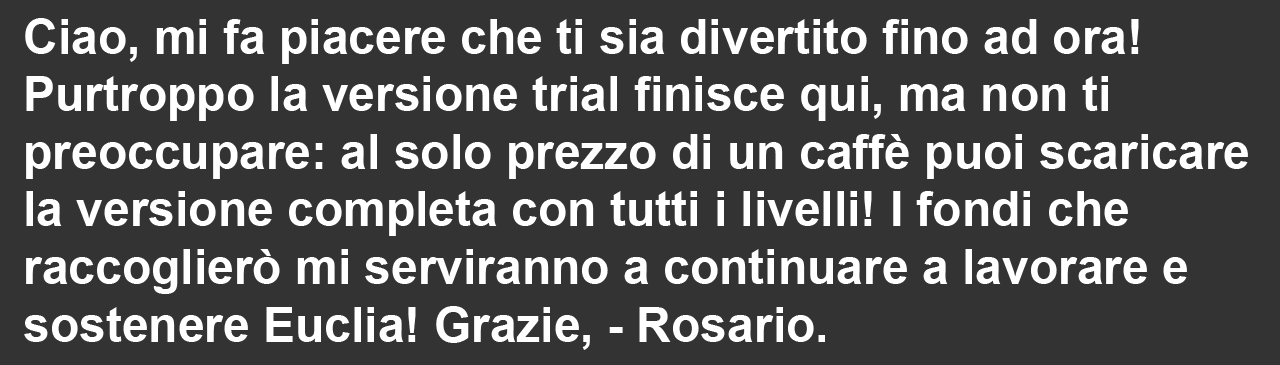
<style>
.page{position:relative;width:1280px;height:365px;background:#333333}
.page>*{position:absolute;margin:0}
.t1{font:48px "Arial-BoldMT";color:#ffffff}
</style>
<div class="page">
<p class="t1" style="left:24px;top:18px;width:1224px;height:332px">Ciao, mi fa piacere che ti sia divertito fino ad ora!<br>Purtroppo la versione trial finisce qui, ma non ti<br>preoccupare: al solo prezzo di un caffè puoi scaricare<br>la versione completa con tutti i livelli! I fondi che<br>raccoglierò mi serviranno a continuare a lavorare e<br>sostenere Euclia! Grazie, - Rosario.</p>
</div>
